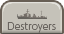
<style>
.page{position:relative;width:64px;height:34px;background:#c5c2b9}
.page>*{position:absolute;margin:0}
.t1{font:10px "UDShinGoPro-Light";color:#6a6560;scale:0.9 1}
</style>
<div class="page">
<p class="t1" style="left:7px;top:22px;width:49px;height:11px">Destroyers</p>
</div>
